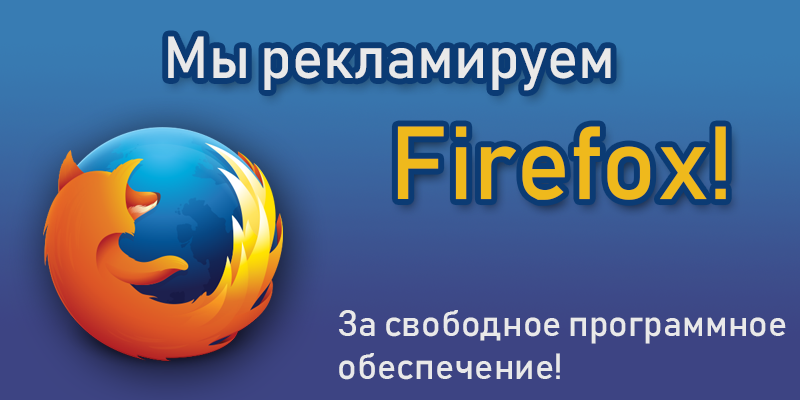
<style>
.page{position:relative;width:800px;height:400px}
.page>*{position:absolute;margin:0}
.t1{font:58.5px "Bahnschrift";color:#e9e9e9}
.t2{font:102px "Bahnschrift";color:#efb91c}
.t3{font:36px "Bahnschrift";color:#e9e9e9}
</style>
<div class="page">
<p class="t1" style="left:168px;top:36px;width:443px;height:55px">Мы рекламируем</p>
<p class="t2" style="left:397px;top:126px;width:329px;height:74px">Firefox!</p>
<p class="t3" style="left:339px;top:310px;width:447px;height:70px">За свободное программное <br>обеспечение!</p>
</div>
